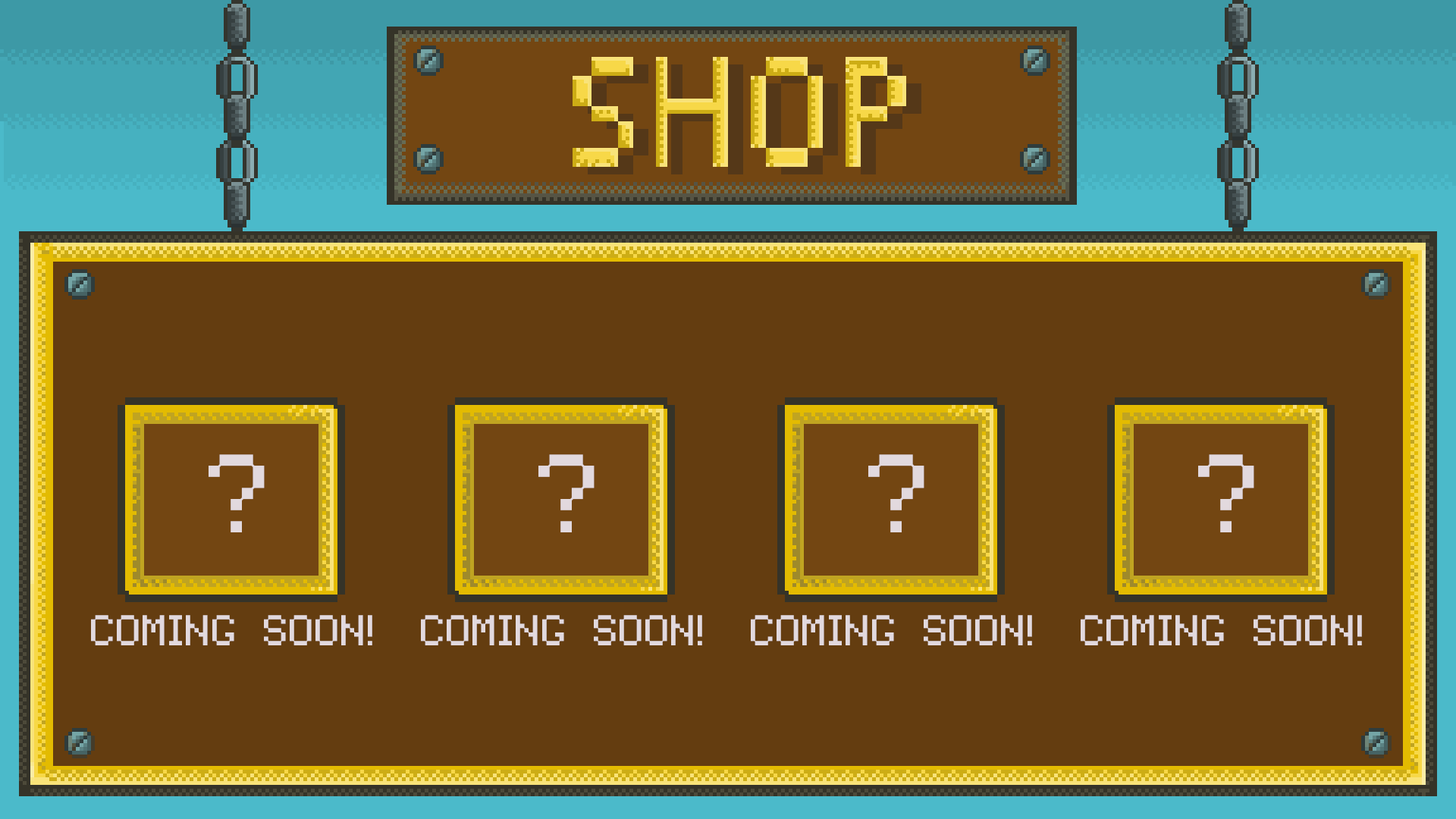
<style>
.page{position:relative;width:1456px;height:819px;background:#643d10}
.page>*{position:absolute;margin:0}
.t1{font:113.7px "Tandysoft";color:#e2d9de}
.t2{font:44.2px "Tandysoft";color:#e2d9de}
</style>
<div class="page">
<p class="t1" style="left:209px;top:454px;width:56px;height:78px">?</p>
<p class="t1" style="left:538px;top:454px;width:57px;height:78px">?</p>
<p class="t1" style="left:868px;top:454px;width:56px;height:78px">?</p>
<p class="t1" style="left:1198px;top:454px;width:56px;height:78px">?</p>
<p class="t2" style="left:91px;top:615px;width:281px;height:30px">Coming Soon!</p>
<p class="t2" style="left:421px;top:615px;width:281px;height:30px">Coming Soon!</p>
<p class="t2" style="left:751px;top:615px;width:281px;height:30px">Coming Soon!</p>
<p class="t2" style="left:1081px;top:615px;width:281px;height:30px">Coming Soon!</p>
</div>
